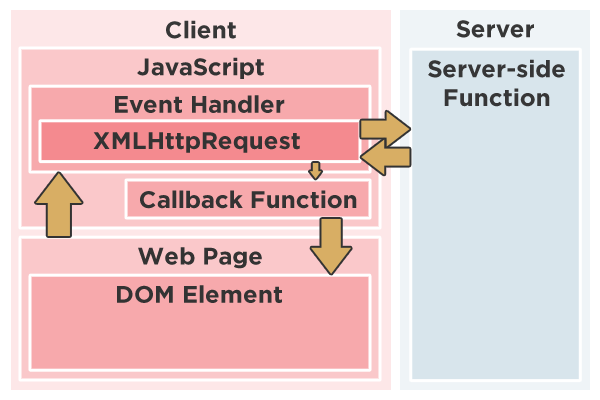
<style>
.page{position:relative;width:600px;height:400px;background:#d8e5ec}
.page>*{position:absolute;margin:0}
.t1{font:24px "Gotham-Bold";color:#333333}
</style>
<div class="page">
<p class="t1" style="left:166px;top:20px;width:70px;height:19px">Client</p>
<p class="t1" style="left:456px;top:20px;width:78px;height:18px">Server</p>
<p class="t1" style="left:137px;top:57px;width:127px;height:22px">JavaScript</p>
<p class="t1" style="left:428px;top:59px;width:137px;height:48px;text-align:center">Server-side<br>Function</p>
<p class="t1" style="left:115px;top:95px;width:170px;height:18px">Event Handler</p>
<p class="t1" style="left:93px;top:132px;width:207px;height:21px">XMLHttpRequest</p>
<p class="t1" style="left:140px;top:190px;width:217px;height:19px">Callback Function</p>
<p class="t1" style="left:138px;top:247px;width:124px;height:22px">Web Page</p>
<p class="t1" style="left:117px;top:285px;width:165px;height:18px">DOM Element</p>
</div>
